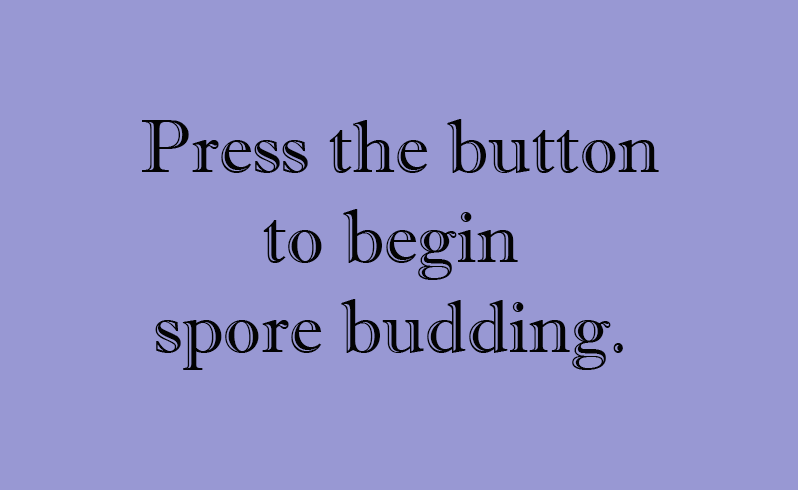
<style>
.page{position:relative;width:798px;height:490px;background:#9898d3}
.page>*{position:absolute;margin:0}
.t1{font:74.8px "ImprintMT-Shadow";color:#030303}
</style>
<div class="page">
<p class="t1" style="left:142px;top:119px;width:517px;height:251px;text-align:center">Press the button<br>to begin <br>spore budding.</p>
</div>
